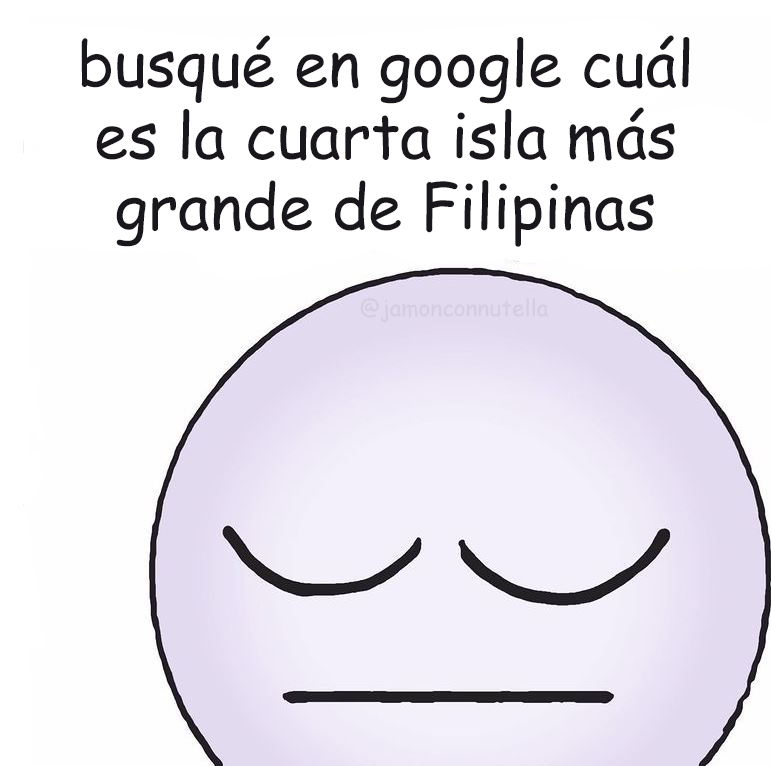
<style>
.page{position:relative;width:771px;height:766px;background:#ffffff}
.page>*{position:absolute;margin:0}
.t1{font:62.3px "ComicSansMS";color:#19171c}
.t2{font:22.6px "ComicSansMS";color:#d5cde1}
</style>
<div class="page">
<p class="t1" style="left:81px;top:35px;width:609px;height:212px;text-align:center">busqué en google cuál<br>es la cuarta isla más<br>grande de Filipinas</p>
<p class="t2" style="left:360px;top:298px;width:188px;height:25px">@jamonconnutella</p>
</div>
